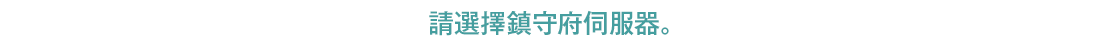
<style>
.page{position:relative;width:1097px;height:45px;background:#ffffff}
.page>*{position:absolute;margin:0}
.t1{font:26px "GothicMB101Pr6N-Medium";color:#459e9f}
</style>
<div class="page">
<p class="t1" style="left:429px;top:10px;width:240px;height:26px">請選擇鎮守府伺服器。</p>
</div>
